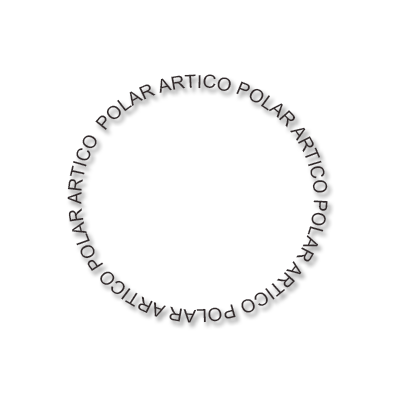
<style>
.page{position:relative;width:400px;height:400px;background:#ffffff}
.page>*{position:absolute;margin:0}
.t1{font:18.1px "ArialMT";color:#332b2c;scale:1.05 1}
</style>
<div class="page">
<p class="t1" style="left:67px;top:74px;width:261px;height:249px">POLAR ARTICO POLAR ARTICO POLAR ARTICO POLAR ARTICO POLAR ARTICO POLAR ARTICO <br>POLAR</p>
</div>
